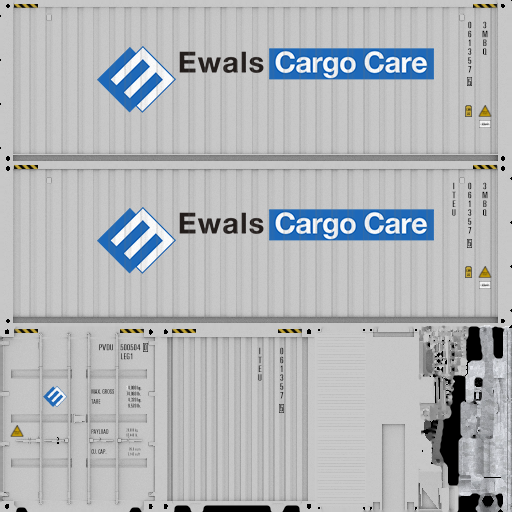
<style>
.page{position:relative;width:512px;height:512px}
.page>*{position:absolute;margin:0}
.t1{font:8.8px/8.8px "Univers-UltraCondensed";scale:1.09 1}
.t2{font:8.8px/12.6px "Univers-UltraCondensed";scale:1.09 1}
.t3{font:8.8px/8.8px "Univers-UltraCondensed";color:#000000;scale:1.09 1}
.t4{font:8.8px/12.6px "Univers-UltraCondensed";color:#000000;scale:1.09 1}
.t5{font:3.5px/0.1px "Univers-UltraCondensed"}
.t6{font:8.3px/15px "Univers-UltraCondensed";scale:1.09 1}
.t7{font:8.3px/21.5px "Univers-UltraCondensed";scale:1.09 1}
.t8{font:8.3px/15px "Univers-UltraCondensed";letter-spacing:-0.01em;scale:1.09 1}
.t9{font:8.3px/9px "Univers-UltraCondensed";scale:1.09 1}
.t10{font:6px/10px "Univers-UltraCondensed"}
.t11{font:4px/5px "Univers-UltraCondensed"}
.t12{font:5px/8px "Univers-UltraCondensed"}
.t13{font:5px/6px "Univers-UltraCondensed"}
</style>
<div class="page">
<p class="t1" style="left:468px;top:21px;width:4px;height:65px;text-align:center"><span class="t2">0<br></span>6<br>1<br>3<br>5<br>7<br><span class="t2">5</span></p>
<p class="t3" style="left:482px;top:21px;width:6px;height:34px;text-align:center"><span class="t4">3<br></span>M<br>B<br>Q</p>
<p class="t5" style="left:480px;top:122px;width:10px;height:4px;text-align:center">unknown<br>label</p>
<p class="t1" style="left:452px;top:182px;width:4px;height:34px;text-align:center"><span class="t2">I<br></span>T<br>E<br>U</p>
<p class="t1" style="left:468px;top:182px;width:4px;height:65px;text-align:center"><span class="t2">0<br></span>6<br>1<br>3<br>5<br>7<br><span class="t2">5</span></p>
<p class="t3" style="left:482px;top:182px;width:6px;height:34px;text-align:center"><span class="t4">3<br></span>M<br>B<br>Q</p>
<p class="t5" style="left:480px;top:283px;width:10px;height:4px;text-align:center">unknown<br>label</p>
<p class="t6" style="left:99px;top:344px;width:48px;height:16px">PVDU    <span class="t7">5</span>0050<span class="t8">4  </span><span class="t7">0<br></span><span class="t9">             LEG1</span></p>
<p class="t1" style="left:258px;top:347px;width:4px;height:34px;text-align:center"><span class="t2">I<br></span>T<br>E<br>U</p>
<p class="t1" style="left:280px;top:347px;width:4px;height:65px;text-align:center"><span class="t2">0<br></span>6<br>1<br>3<br>5<br>7<br><span class="t2">5</span></p>
<p class="t10" style="left:91px;top:389px;width:23px;height:65px">MAX. GROSS<br>TARE<br><br><br>PAYLOAD<br><br>CU. CAP.</p>
<p class="t11" style="left:126px;top:385px;width:16px;height:71px"><span class="t12">3</span><span class="t13">4.000 kg.<br>74.960 lb.<br>  4.320 kg.<br>  9.520 lb.<br><br></span><br><br>29.680 kg.<br>65.440 lb.<br><br>    89.0 cu.m<br>  3.145 cu.ft</p>
</div>
